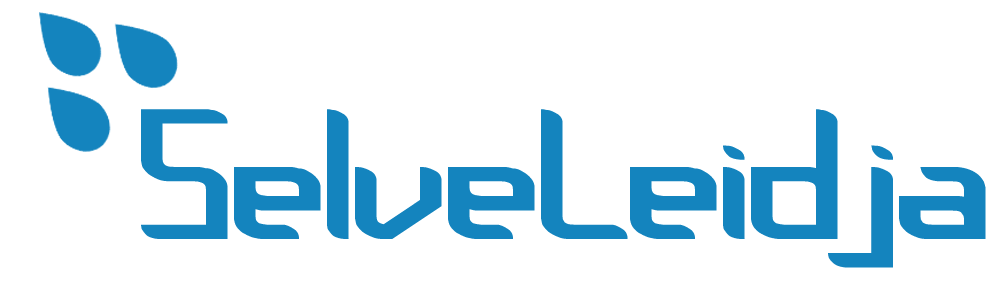
<style>
.page{position:relative;width:1000px;height:300px;background:#ffffff}
.page>*{position:absolute;margin:0}
.t1{font:178.6px "ChemicalReactionB-BRK-";color:#1484be;scale:0.9 1}
</style>
<div class="page">
<p class="t1" style="left:141px;top:109px;width:845px;height:159px">SelveLeidja</p>
</div>
